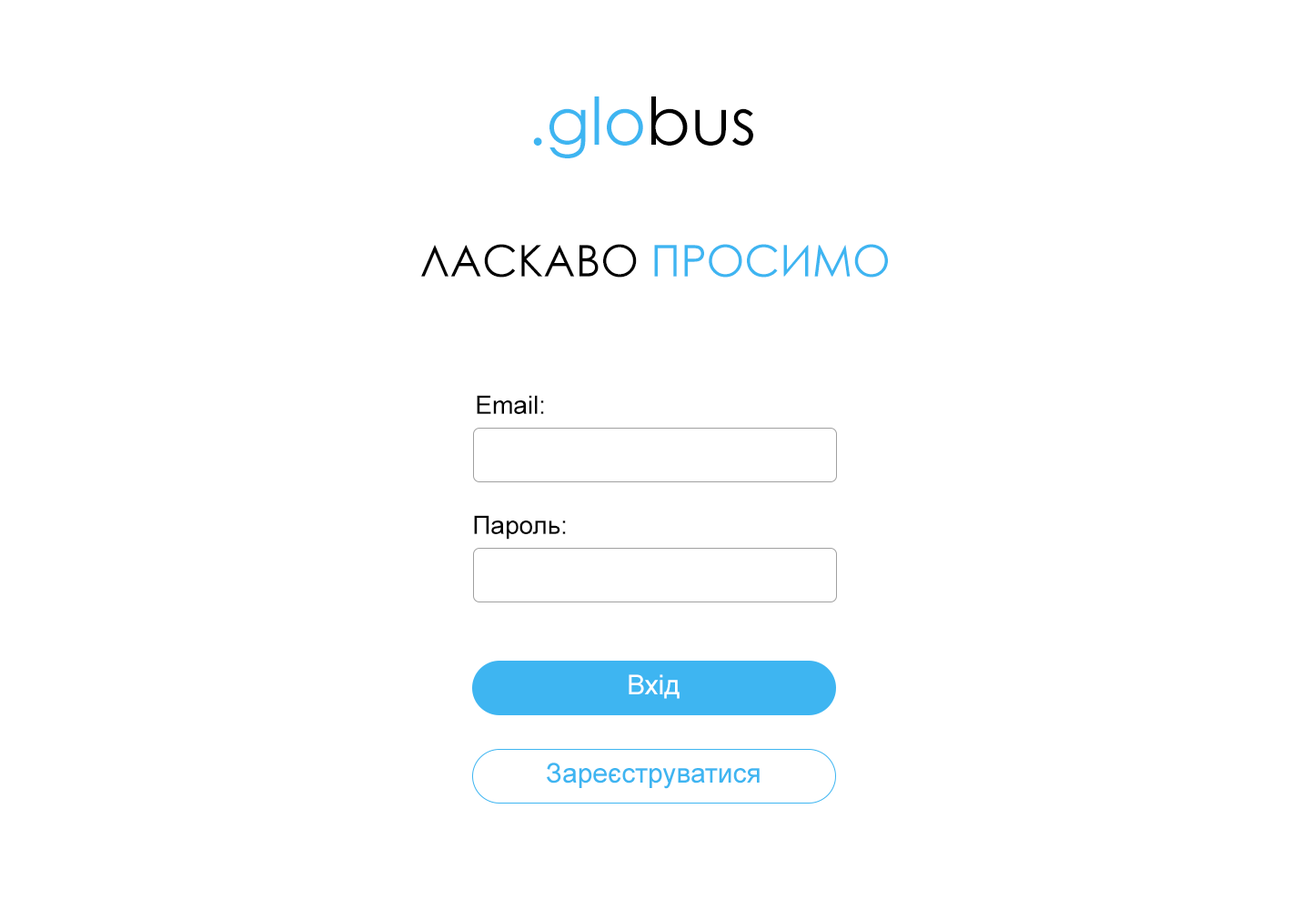
<style>
.page{position:relative;width:1310px;height:910px;background:#ffffff}
.page>*{position:absolute;margin:0}
.t1{font:65.5px "CenturyGothic";color:#3eb5f1}
.t2{font:65.5px "CenturyGothic";color:#000000}
.t3{font:43.7px "CenturyGothic";color:#000000}
.t4{font:43.7px "CenturyGothic";color:#3eb5f1}
.t5{font:25.5px "ArialMT";color:#000000}
.t6{font:27.3px "ArialMT";color:#ffffff}
.t7{font:27.3px "ArialMT";color:#3eb5f1}
</style>
<div class="page">
<p class="t1" style="left:533px;top:96px;width:220px;height:62px">.glo<span class="t2">bus</span></p>
<p class="t3" style="left:421px;top:244px;width:467px;height:34px">ЛАСКАВО <span class="t4">ПРОСИМО</span></p>
<p class="t5" style="left:477px;top:395px;width:67px;height:19px">Email:</p>
<p class="t5" style="left:474px;top:515px;width:92px;height:25px">Пароль:</p>
<p class="t6" style="left:629px;top:674px;width:51px;height:25px">Вхід</p>
<p class="t7" style="left:547px;top:763px;width:213px;height:26px">Зареєструватися</p>
</div>
